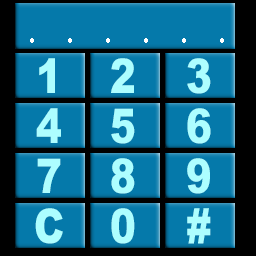
<style>
.page{position:relative;width:256px;height:256px;background:#0579aa}
.page>*{position:absolute;margin:0}
.t1{font:30px "CalisMTBol";color:#ffffff;scale:0.8 1}
.t2{font:48px "Arial-Black";color:#adfeff;scale:0.8 1}
</style>
<div class="page">
<p class="t1" style="left:30px;top:38px;width:194px;height:5px">.     .     .     .     .     .</p>
<p class="t2" style="left:39px;top:58px;width:16px;height:35px">1</p>
<p class="t2" style="left:111px;top:58px;width:23px;height:35px">2</p>
<p class="t2" style="left:187px;top:58px;width:24px;height:36px">3</p>
<p class="t2" style="left:36px;top:108px;width:25px;height:35px">4</p>
<p class="t2" style="left:111px;top:108px;width:24px;height:36px">5</p>
<p class="t2" style="left:187px;top:108px;width:24px;height:36px">6</p>
<p class="t2" style="left:37px;top:158px;width:24px;height:35px">7</p>
<p class="t2" style="left:111px;top:158px;width:24px;height:36px">8</p>
<p class="t2" style="left:187px;top:158px;width:23px;height:36px">9</p>
<p class="t2" style="left:35px;top:208px;width:28px;height:36px">C</p>
<p class="t2" style="left:111px;top:208px;width:24px;height:36px">0</p>
<p class="t2" style="left:187px;top:208px;width:24px;height:36px">#</p>
</div>
